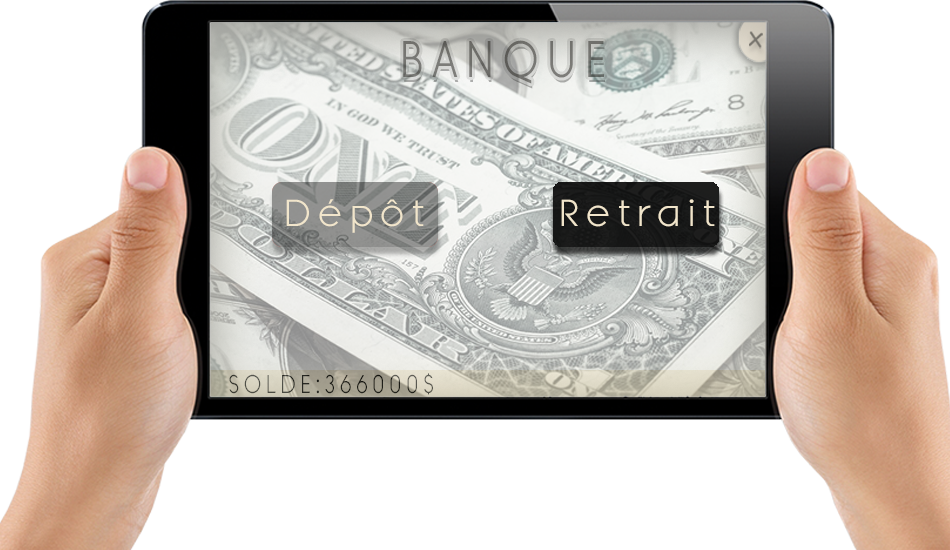
<style>
.page{position:relative;width:950px;height:550px;background:#ffffff}
.page>*{position:absolute;margin:0}
.t1{font:51.4px "BanksMilesSingleLine";letter-spacing:0.2em;color:#71716d;scale:0.86 1}
.t2{font:37.5px "BanksMilesSingleLine";letter-spacing:0.2em;color:#f1e5cb}
.t3{font:25.7px "BanksMilesSingleLine";letter-spacing:0.2em;scale:0.86 1}
</style>
<div class="page">
<p class="t1" style="left:403px;top:40px;width:201px;height:44px">BANQUE</p>
<p class="t2" style="left:286px;top:199px;width:138px;height:34px">Dépôt</p>
<p class="t2" style="left:561px;top:199px;width:154px;height:28px">Retrait</p>
<p class="t3" style="left:229px;top:373px;width:204px;height:22px">SOLDE:366000$</p>
</div>
